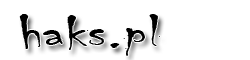
<style>
.page{position:relative;width:250px;height:60px;background:#ffffff}
.page>*{position:absolute;margin:0}
.t1{font:48px "Chiller-Regular";color:#010101;scale:1.5 1}
</style>
<div class="page">
<p class="t1" style="left:19px;top:14px;width:141px;height:42px">haks.pl</p>
</div>
